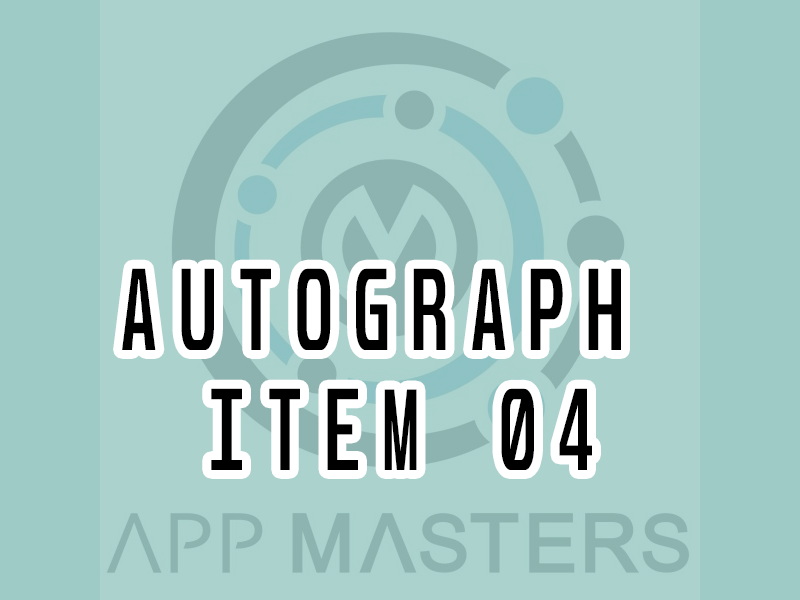
<style>
.page{position:relative;width:800px;height:600px;background:#abd2cd}
.page>*{position:absolute;margin:0}
.t1{font:100.3px/120px "Unispace-Bold";letter-spacing:0.34em;color:#000000;text-transform:uppercase;scale:0.61 1}
</style>
<div class="page">
<p class="t1" style="left:122px;top:268px;width:499px;height:202px;text-align:center">Autograph <br>Item 04</p>
</div>
